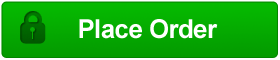
<style>
.page{position:relative;width:280px;height:60px}
.page>*{position:absolute;margin:0}
.t1{font:26px "Arial-BoldMT";letter-spacing:-0.025em;color:#ffffff}
</style>
<div class="page">
<p class="t1" style="left:79px;top:19px;width:139px;height:20px">Place Order</p>
</div>
